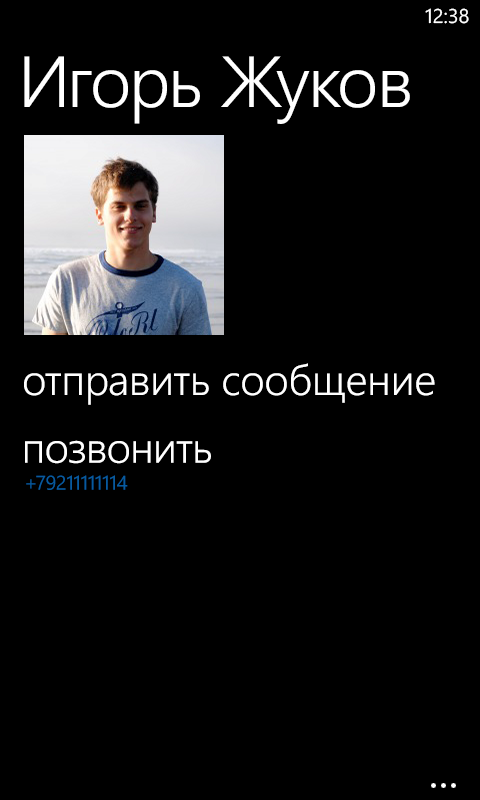
<style>
.page{position:relative;width:480px;height:800px;background:#000000}
.page>*{position:absolute;margin:0}
.t1{font:20px "SegoeWP";color:#ffffff}
.t2{font:72px "SegoeWP-SemiLight";letter-spacing:-0.01em;color:#ffffff}
.t3{font:42.7px "SegoeWP-SemiLight";letter-spacing:-0.01em;color:#ffffff}
</style>
<div class="page">
<p class="t1" style="left:425px;top:8px;width:44px;height:16px">12:38</p>
<p class="t2" style="left:24px;top:56px;width:386px;height:68px">Игорь Жуков</p>
<p class="t3" style="left:24px;top:363px;width:411px;height:42px">отправить сообщение</p>
<p class="t3" style="left:25px;top:440px;width:186px;height:24px">позвонить</p>
</div>
